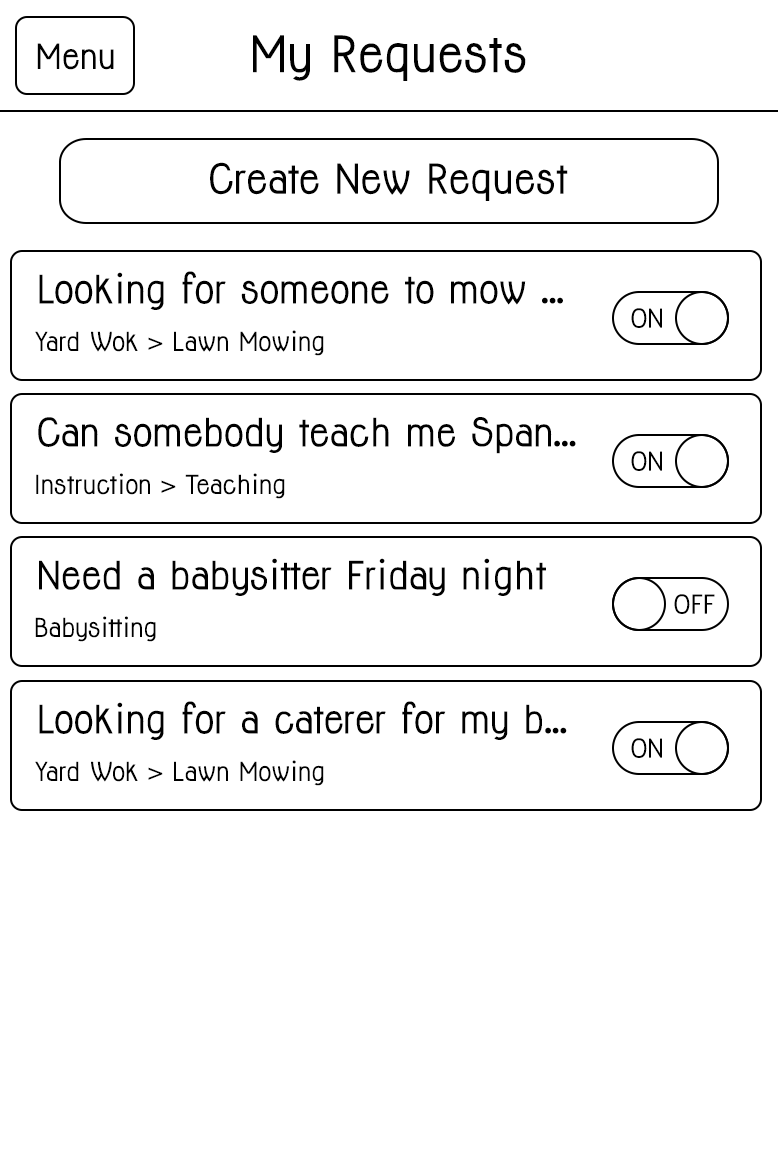
<style>
.page{position:relative;width:778px;height:1167px;background:#ffffff}
.page>*{position:absolute;margin:0}
.t1{font:46.2px "Jolly-Bold";color:#000000}
.t2{font:32px "Jolly-Bold";color:#000000}
.t3{font:38px "Jolly-Bold";color:#000000}
.t4{font:35.9px "Jolly-Bold";color:#000000}
.t5{font:24px "Jolly-Bold";color:#000000}
.t6{font:23.9px "Jolly-Bold";color:#000000}
</style>
<div class="page">
<p class="t1" style="left:253px;top:35px;width:273px;height:46px">My Requests</p>
<p class="t2" style="left:37px;top:43px;width:77px;height:27px">Menu</p>
<p class="t3" style="left:210px;top:162px;width:358px;height:39px">Create New Request</p>
<p class="t4" style="left:39px;top:271px;width:524px;height:39px">Looking for someone to mow ...</p>
<p class="t5" style="left:631px;top:308px;width:31px;height:20px">ON</p>
<p class="t6" style="left:35px;top:330px;width:289px;height:26px">Yard Wok &gt; Lawn Mowing</p>
<p class="t4" style="left:38px;top:417px;width:538px;height:37px">Can somebody teach me Span...</p>
<p class="t5" style="left:631px;top:451px;width:31px;height:20px">ON</p>
<p class="t6" style="left:36px;top:473px;width:249px;height:26px">Instruction &gt; Teaching</p>
<p class="t4" style="left:39px;top:558px;width:507px;height:38px">Need a babysitter Friday night</p>
<p class="t5" style="left:674px;top:594px;width:41px;height:20px">OFF</p>
<p class="t6" style="left:35px;top:616px;width:121px;height:26px">Babysitting</p>
<p class="t4" style="left:39px;top:701px;width:528px;height:39px">Looking for a caterer for my b...</p>
<p class="t5" style="left:631px;top:738px;width:31px;height:20px">ON</p>
<p class="t6" style="left:35px;top:760px;width:289px;height:26px">Yard Wok &gt; Lawn Mowing</p>
</div>
